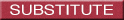
<style>
.page{position:relative;width:124px;height:20px}
.page>*{position:absolute;margin:0}
.t1{font:14px "Helvetica";color:#ffffff;scale:1.2 1}
</style>
<div class="page">
<p class="t1" style="left:10px;top:4px;width:103px;height:11px">SUBSTITUTE</p>
</div>
